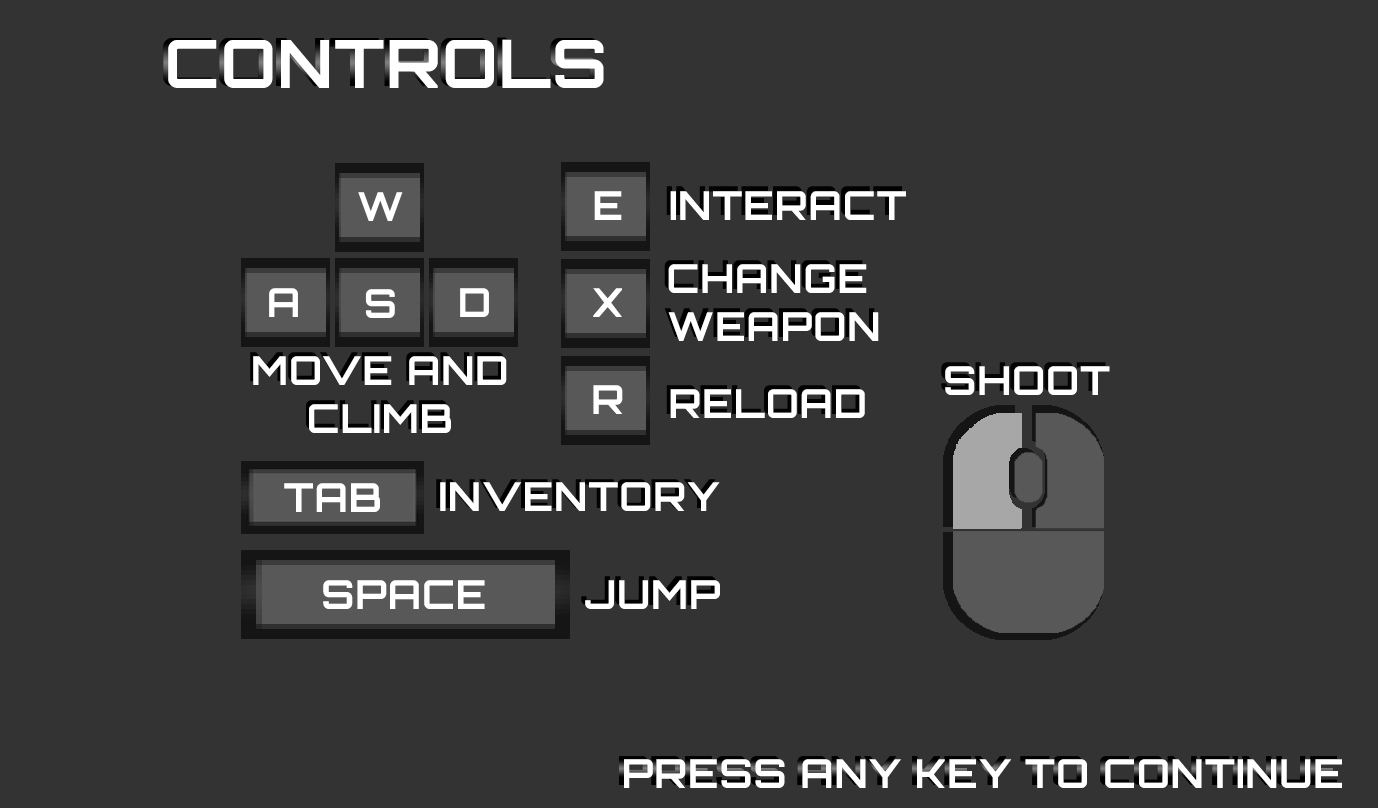
<style>
.page{position:relative;width:1378px;height:808px;background:#333333}
.page>*{position:absolute;margin:0}
.t1{font:66.7px "Orbitron-Bold";letter-spacing:0.02em;color:#ffffff}
.t2{font:40px "Orbitron-Bold";letter-spacing:0.02em;color:#ffffff}
</style>
<div class="page">
<p class="t1" style="left:168px;top:39px;width:436px;height:49px">CONTROLS</p>
<p class="t2" style="left:594px;top:191px;width:28px;height:29px">E</p>
<p class="t2" style="left:670px;top:191px;width:236px;height:29px">INTERACT</p>
<p class="t2" style="left:668px;top:264px;width:211px;height:77px;text-align:center">CHANGE <br>WEAPON</p>
<p class="t2" style="left:593px;top:288px;width:29px;height:29px">X</p>
<p class="t2" style="left:253px;top:356px;width:254px;height:77px;text-align:center">MOVE AND<br>CLIMB</p>
<p class="t2" style="left:945px;top:366px;width:165px;height:29px">SHOOT</p>
<p class="t2" style="left:593px;top:385px;width:30px;height:29px">R</p>
<p class="t2" style="left:670px;top:389px;width:195px;height:29px">RELOAD</p>
<p class="t2" style="left:284px;top:483px;width:96px;height:29px">TAB</p>
<p class="t2" style="left:440px;top:482px;width:280px;height:29px">INVENTORY</p>
<p class="t2" style="left:323px;top:580px;width:162px;height:29px">SPACE</p>
<p class="t2" style="left:585px;top:580px;width:135px;height:29px">JUMP</p>
<p class="t2" style="left:624px;top:759px;width:718px;height:29px">PRESS ANY KEY TO CONTINUE</p>
</div>
